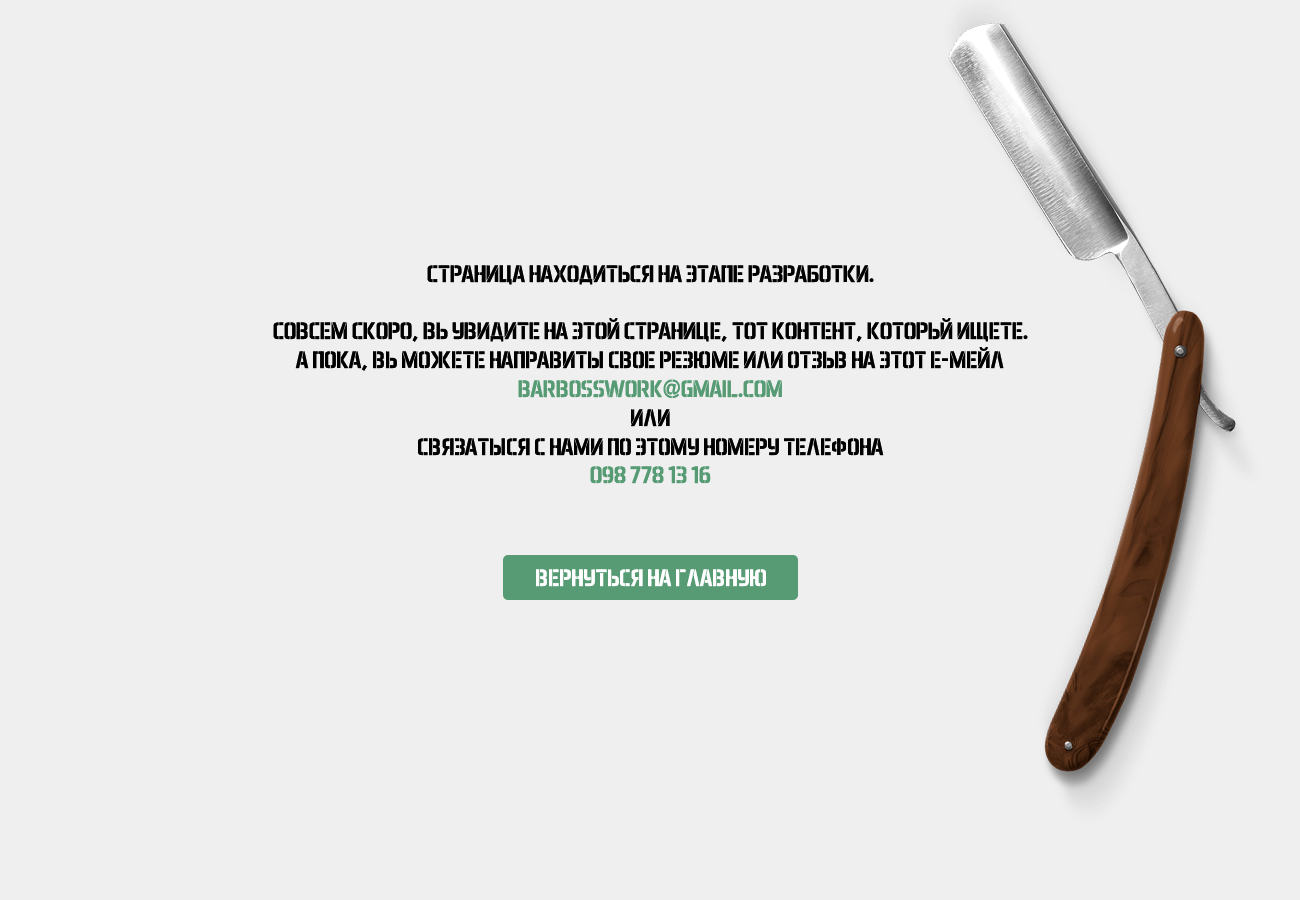
<style>
.page{position:relative;width:1300px;height:900px;background:#efefef}
.page>*{position:absolute;margin:0}
.t1{font:24px "AeroMaticsStencilBold";color:#000000;text-transform:uppercase}
.t2{font:24px "AeroMaticsStencilBold";color:#569b74;text-transform:uppercase}
.t3{font:24px "AeroMaticsStencilBold";color:#fefefe;text-transform:uppercase}
</style>
<div class="page">
<p class="t1" style="left:273px;top:265px;width:755px;height:219px;text-align:center">Страница находитыся на этапе разработки. <br><br>Совсем скоро, вы увидите на этой странице, тот контент, который ищете. <br>А пока, вы можете направить свое резюме или отзыв на этот е-мейл <br><span class="t2">barbosswork@gmail.com </span> <br>или <br>связаться с нами по этому номеру телефона <br><span class="t2">098 778 13 16</span></p>
<p class="t3" style="left:536px;top:569px;width:230px;height:18px">вернутыся на главную</p>
</div>
